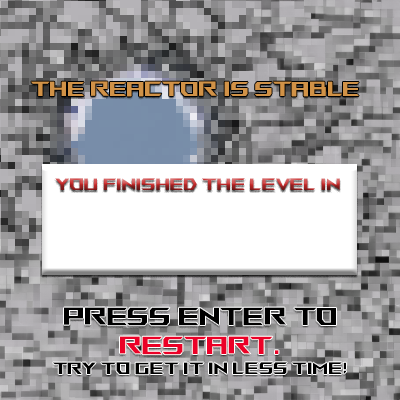
<style>
.page{position:relative;width:400px;height:400px}
.page>*{position:absolute;margin:0}
.t1{font:20.5px "ROGFonts-Regular";color:#d19247}
.t2{font:16.3px "ROGFonts-Regular"}
.t3{font:16.3px "ROGFonts-Regular";color:#000000}
.t4{font:24.7px "ROGFonts-Regular";color:#000000}
.t5{font:24.7px "ROGFonts-Regular";color:#eb0027}
</style>
<div class="page">
<p class="t1" style="left:31px;top:81px;width:328px;height:16px">The Reactor is Stable</p>
<p class="t2" style="left:55px;top:178px;width:285px;height:12px">You finished the level in</p>
<p class="t3" style="left:53px;top:307px;width:293px;height:68px;text-align:center"><span class="t4">Press enter to<br></span><span class="t5">restart.<br></span>Try to get it in less time!</p>
</div>
